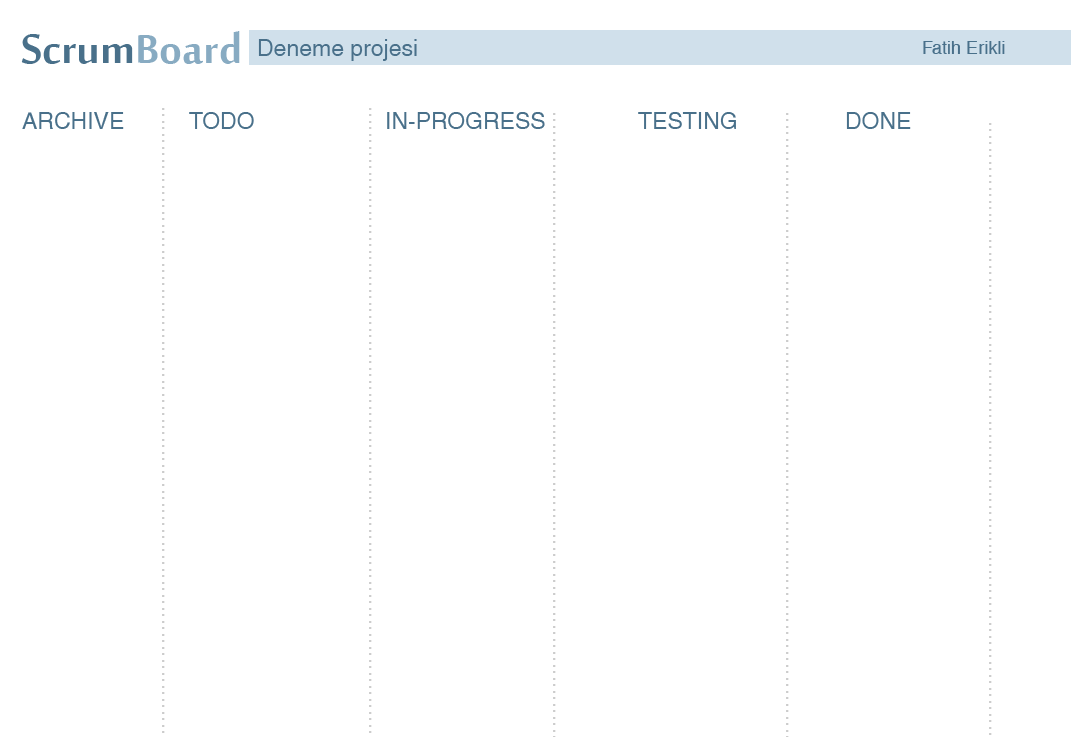
<style>
.page{position:relative;width:1085px;height:737px;background:#ffffff}
.page>*{position:absolute;margin:0}
.t1{font:55px "SakkalMajallaBold";color:#49708a}
.t2{font:55px "SakkalMajallaBold";color:#88abc2}
.t3{font:23px "Helvetica";color:#49708a}
.t4{font:18px "Helvetica";color:#49708a}
</style>
<div class="page">
<p class="t1" style="left:21px;top:31px;width:219px;height:33px">Scrum<span class="t2">Board</span></p>
<p class="t3" style="left:258px;top:39px;width:159px;height:22px">Deneme projesi</p>
<p class="t4" style="left:923px;top:41px;width:82px;height:13px">Fatih Erikli</p>
<p class="t3" style="left:22px;top:112px;width:102px;height:17px">ARCHIVE</p>
<p class="t3" style="left:189px;top:112px;width:65px;height:17px">TODO</p>
<p class="t3" style="left:387px;top:112px;width:158px;height:17px">IN-PROGRESS</p>
<p class="t3" style="left:638px;top:112px;width:98px;height:17px">TESTING</p>
<p class="t3" style="left:846px;top:112px;width:65px;height:17px">DONE</p>
</div>
